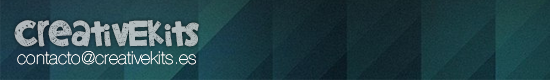
<style>
.page{position:relative;width:550px;height:80px}
.page>*{position:absolute;margin:0}
.t1{font:36.9px "LittleSnorlax";letter-spacing:0.005em;color:#b2bcbe}
.t2{font:18px "HelveticaNeue-UltraLight";letter-spacing:0.005em;color:#ffffff}
</style>
<div class="page">
<p class="t1" style="left:14px;top:20px;width:185px;height:27px">creativEkits</p>
<p class="t2" style="left:17px;top:51px;width:179px;height:14px">contacto@creativekits.es</p>
</div>
